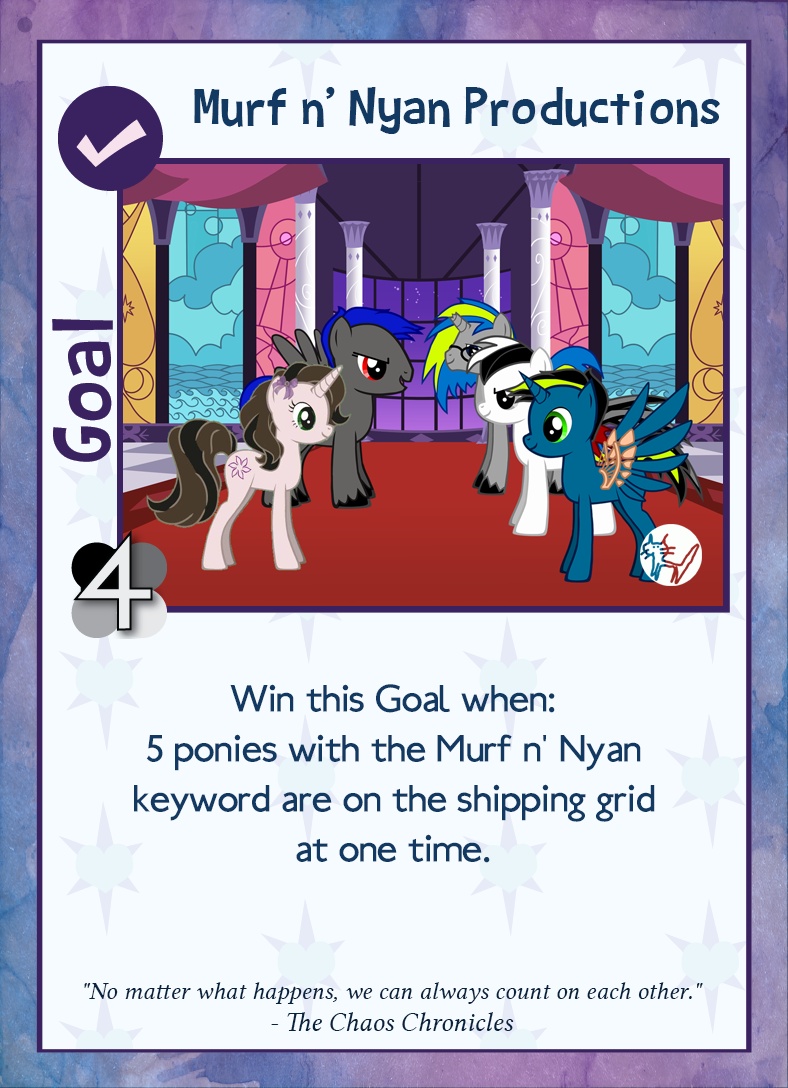
<style>
.page{position:relative;width:788px;height:1088px;background:#f5fbfe}
.page>*{position:absolute;margin:0}
.t1{font:56.2px "BarthowheelRegular";color:#123962}
.t2{font:41.7px "Ubahn";color:#123962}
.t3{font:25px "LinLibertineI";color:#07223e}
.t4{font:27.1px "LinLibertineI";color:#07223e}
</style>
<div class="page">
<p class="t1" style="left:194px;top:87px;width:526px;height:47px">Murf n’ Nyan Productions</p>
<p class="t2" style="left:134px;top:684px;width:521px;height:179px;text-align:center">Win this Goal when:<br>5 ponies with the Murf n' Nyan<br>keyword are on the shipping grid<br>at one time.</p>
<p class="t3" style="left:84px;top:982px;width:619px;height:49px;text-align:center">"No matter what happens, we can always count on each other."<br>- <span class="t4">The Chaos Chronicles</span></p>
</div>
